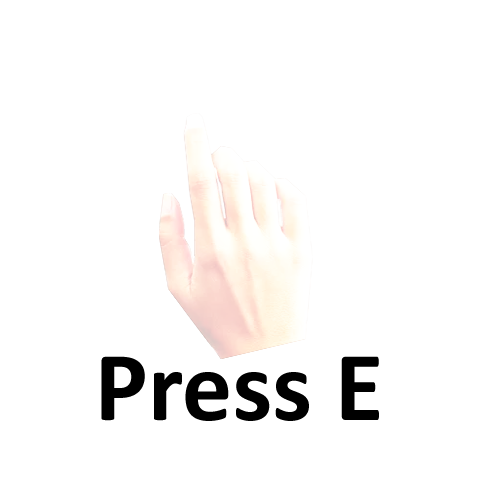
<style>
.page{position:relative;width:480px;height:480px;background:#ffffff}
.page>*{position:absolute;margin:0}
.t1{font:100px "Calibri-Bold";color:#000000}
</style>
<div class="page">
<p class="t1" style="left:101px;top:356px;width:278px;height:65px">Press E</p>
</div>
